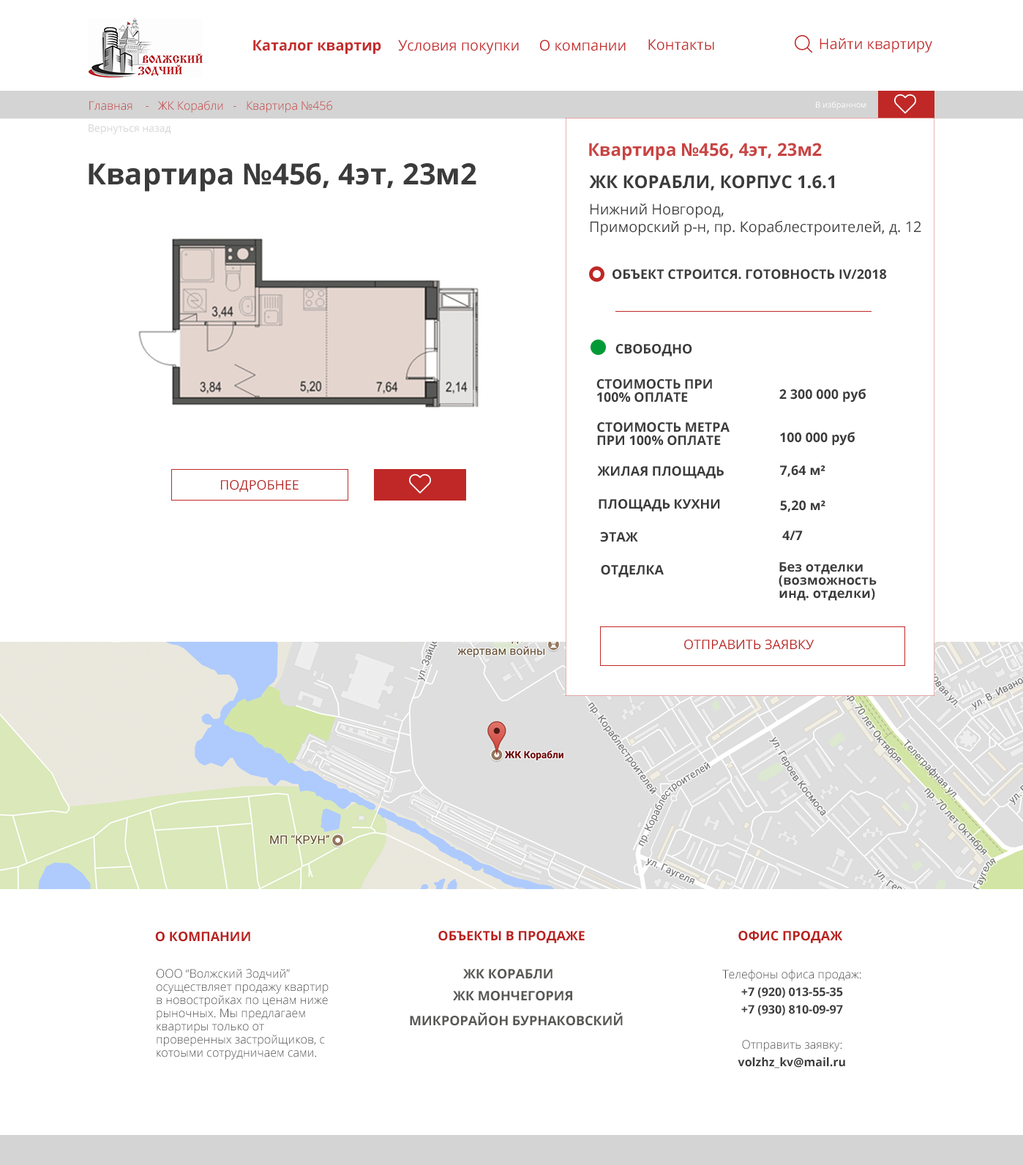
<style>
.page{position:relative;width:1023px;height:1165px;background:#ffffff}
.page>*{position:absolute;margin:0}
.t1{font:14.6px "OpenSans-Bold";color:#c42d2d}
.t2{font:14.6px "OpenSans";color:#c42d2d}
.t3{font:11.7px "OpenSans-Light";color:#c42d2d}
.t4{font:8.1px "OpenSans";color:#fffdfd}
.t5{font:10.2px "OpenSans";color:#d4d4d4}
.t6{font:17.6px "OpenSans-Bold";color:#c94343}
.t7{font:29.3px "OpenSans-Bold";color:#3b3b3b}
.t8{font:17.6px "OpenSans-Bold";color:#3b3b3b}
.t9{font:14.6px/17.6px "OpenSans";color:#3b3b3b}
.t10{font:13.2px "OpenSans-Bold";color:#3b3b3b}
.t11{font:13.2px/13.2px "OpenSans-Bold";color:#3b3b3b}
.t12{font:13.2px "OpenSans";color:#b9201e}
.t13{font:13.2px "OpenSans-Bold";color:#b9201e}
.t14{font:11.7px/13.2px "OpenSans-Light";color:#3b3b3b}
.t15{font:13.2px "OpenSans-Bold";color:#585856}
.t16{font:11.7px/17.6px "OpenSans-Bold";color:#3b3b3b}
.t17{font:11.7px/17.6px "OpenSans-Light";color:#3b3b3b}
.t18{font:13.2px "OpenSans-Bold";color:#575756}
.t19{font:13.2px "OpenSans-Bold";color:#585956}
</style>
<div class="page">
<p class="t1" style="left:253px;top:40px;width:128px;height:14px">Каталог квартир</p>
<p class="t2" style="left:398px;top:40px;width:121px;height:14px">Условия покупки</p>
<p class="t2" style="left:540px;top:40px;width:86px;height:11px">О компании</p>
<p class="t2" style="left:649px;top:39px;width:65px;height:12px">Контакты</p>
<p class="t2" style="left:820px;top:38px;width:113px;height:15px">Найти квартиру</p>
<p class="t3" style="left:89px;top:100px;width:243px;height:13px">Главная    -   ЖК Корабли   -   Квартира №456</p>
<p class="t4" style="left:816px;top:101px;width:51px;height:9px">В избранном</p>
<p class="t5" style="left:89px;top:124px;width:82px;height:11px">Вернуться назад</p>
<p class="t6" style="left:589px;top:143px;width:233px;height:17px">Квартира №456, 4эт, 23м2</p>
<p class="t7" style="left:89px;top:163px;width:388px;height:29px">Квартира №456, 4эт, 23м2</p>
<p class="t8" style="left:589px;top:175px;width:245px;height:16px">ЖК КОРАБЛИ, КОРПУС 1.6.1</p>
<p class="t9" style="left:591px;top:203px;width:331px;height:33px">Нижний Новгород,<br>Приморский р-н, пр. Кораблестроителей, д. 12</p>
<p class="t10" style="left:613px;top:269px;width:274px;height:11px">ОБЪЕКТ СТРОИТСЯ. ГОТОВНОСТЬ IV/2018</p>
<p class="t10" style="left:616px;top:344px;width:76px;height:12px">СВОБОДНО</p>
<p class="t11" style="left:597px;top:379px;width:115px;height:24px">СТОИМОСТЬ ПРИ<br>100% ОПЛАТЕ</p>
<p class="t10" style="left:780px;top:389px;width:86px;height:14px">2 300 000 руб</p>
<p class="t11" style="left:597px;top:422px;width:133px;height:24px">СТОИМОСТЬ МЕТРА<br>ПРИ 100% ОПЛАТЕ</p>
<p class="t10" style="left:780px;top:432px;width:75px;height:14px">100 000 руб</p>
<p class="t10" style="left:597px;top:466px;width:127px;height:13px">ЖИЛАЯ ПЛОЩАДЬ</p>
<p class="t10" style="left:780px;top:466px;width:46px;height:11px">7,64 м²</p>
<p class="t12" style="left:221px;top:480px;width:78px;height:13px">ПОДРОБНЕЕ</p>
<p class="t10" style="left:599px;top:499px;width:121px;height:13px">ПЛОЩАДЬ КУХНИ</p>
<p class="t10" style="left:780px;top:501px;width:46px;height:11px">5,20 м²</p>
<p class="t10" style="left:600px;top:532px;width:38px;height:10px">ЭТАЖ</p>
<p class="t10" style="left:782px;top:531px;width:21px;height:9px">4/7</p>
<p class="t10" style="left:601px;top:565px;width:63px;height:13px">ОТДЕЛКА</p>
<p class="t11" style="left:779px;top:562px;width:98px;height:39px">Без отделки <br>(возможность <br>инд. отделки)</p>
<p class="t12" style="left:684px;top:640px;width:131px;height:10px">ОТПРАВИТЬ ЗАЯВКУ</p>
<p class="t13" style="left:155px;top:932px;width:95px;height:10px">О КОМПАНИИ</p>
<p class="t13" style="left:438px;top:931px;width:147px;height:13px">ОБЪЕКТЫ В ПРОДАЖЕ</p>
<p class="t13" style="left:739px;top:931px;width:104px;height:13px">ОФИС ПРОДАЖ</p>
<p class="t14" style="left:157px;top:969px;width:172px;height:91px">ООО “Волжский Зодчий” осуществляет продажу квартир в новостройках по ценам ниже рыночных. Мы предлагаем квартиры только от проверенных застройщиков, с котоыми сотрудничаем сами.</p>
<p class="t15" style="left:463px;top:969px;width:90px;height:10px">ЖК КОРАБЛИ</p>
<p class="t16" style="left:722px;top:969px;width:140px;height:100px;text-align:center"><span class="t17">Телефоны офиса продаж:<br></span>+7 (920) 013-55-35 <br>+7 (930) 810-09-97<br><br><span class="t17">Отправить заявку:<br></span>volzhz_kv@mail.ru</p>
<p class="t18" style="left:453px;top:991px;width:119px;height:10px">ЖК МОНЧЕГОРИЯ</p>
<p class="t19" style="left:410px;top:1012px;width:213px;height:14px">МИКРОРАЙОН БУРНАКОВСКИЙ</p>
</div>
